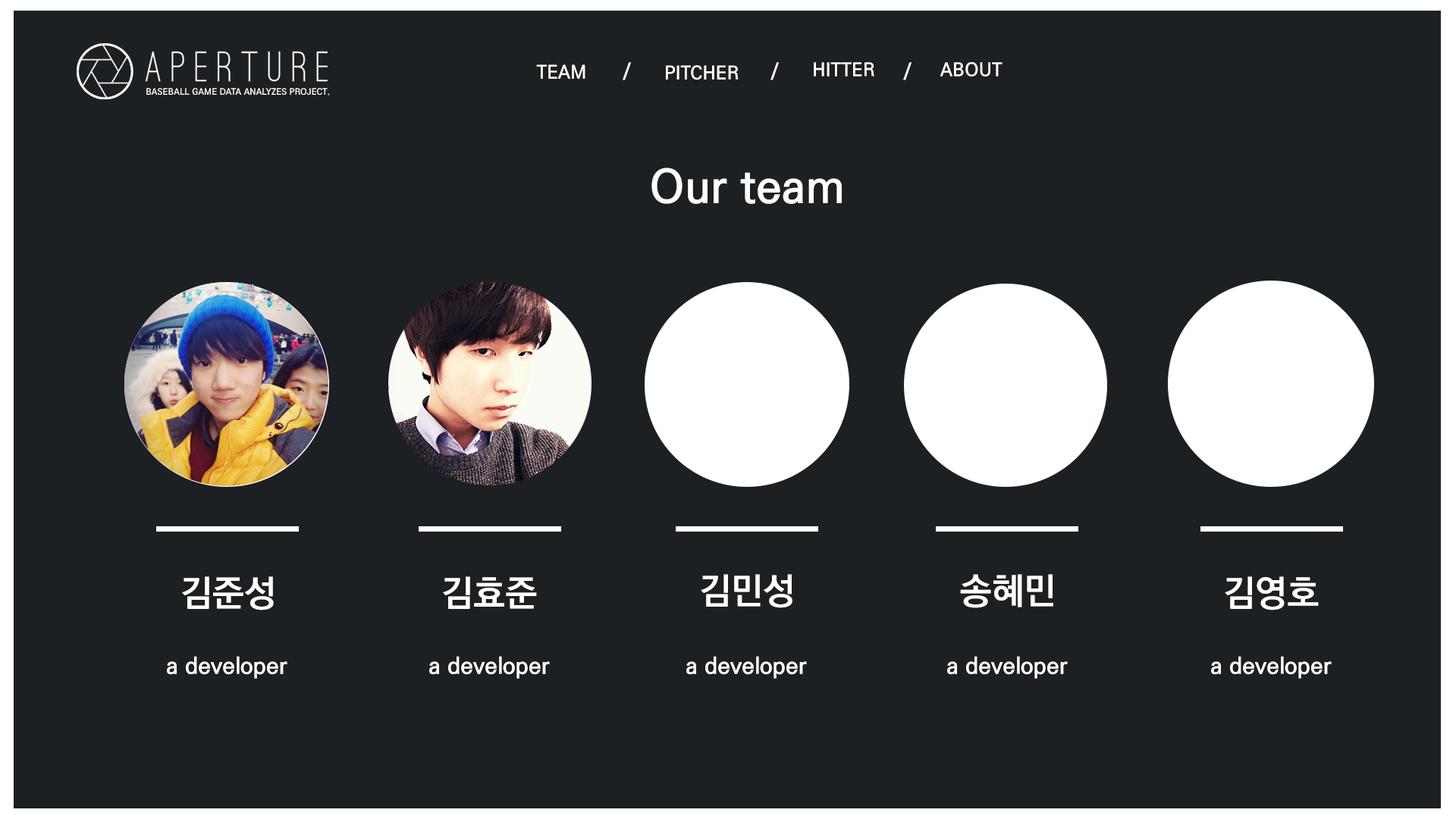
<style>
.page{position:relative;width:1456px;height:819px;background:#1d2023}
.page>*{position:absolute;margin:0}
.t1{font:18.2px "KoPubDotumPB";letter-spacing:0.01em;color:#ffffff}
.t2{font:8.6px "KoPubDotumPB";letter-spacing:0.01em;color:#ffffff}
.t3{font:45.5px "KoPubDotumPB";letter-spacing:0.01em;color:#ffffff}
.t4{font:36.4px "KoPubDotumPB";letter-spacing:0.01em;color:#ffffff}
.t5{font:22.7px "KoPubDotumPB";letter-spacing:0.01em;color:#ffffff}
</style>
<div class="page">
<p class="t1" style="left:536px;top:64px;width:49px;height:15px">TEAM</p>
<p class="t1" style="left:623px;top:62px;width:8px;height:18px">/</p>
<p class="t1" style="left:666px;top:65px;width:73px;height:15px">PITCHER</p>
<p class="t1" style="left:770px;top:62px;width:9px;height:18px">/</p>
<p class="t1" style="left:814px;top:62px;width:60px;height:15px">HITTER</p>
<p class="t1" style="left:903px;top:62px;width:9px;height:18px">/</p>
<p class="t1" style="left:940px;top:62px;width:63px;height:15px">ABOUT</p>
<p class="t2" style="left:146px;top:88px;width:183px;height:8px">BASEBALL GAME DATA ANALYZES PROJECT.</p>
<p class="t3" style="left:651px;top:168px;width:191px;height:36px">Our team</p>
<p class="t4" style="left:182px;top:576px;width:92px;height:34px">김준성</p>
<p class="t4" style="left:443px;top:576px;width:94px;height:33px">김효준</p>
<p class="t4" style="left:701px;top:574px;width:91px;height:34px">김민성</p>
<p class="t4" style="left:960px;top:574px;width:93px;height:34px">송혜민</p>
<p class="t4" style="left:1225px;top:576px;width:94px;height:34px">김영호</p>
<p class="t5" style="left:167px;top:656px;width:120px;height:23px">a developer</p>
<p class="t5" style="left:429px;top:656px;width:121px;height:23px">a developer</p>
<p class="t5" style="left:686px;top:656px;width:121px;height:23px">a developer</p>
<p class="t5" style="left:947px;top:656px;width:121px;height:23px">a developer</p>
<p class="t5" style="left:1211px;top:656px;width:121px;height:23px">a developer</p>
</div>
